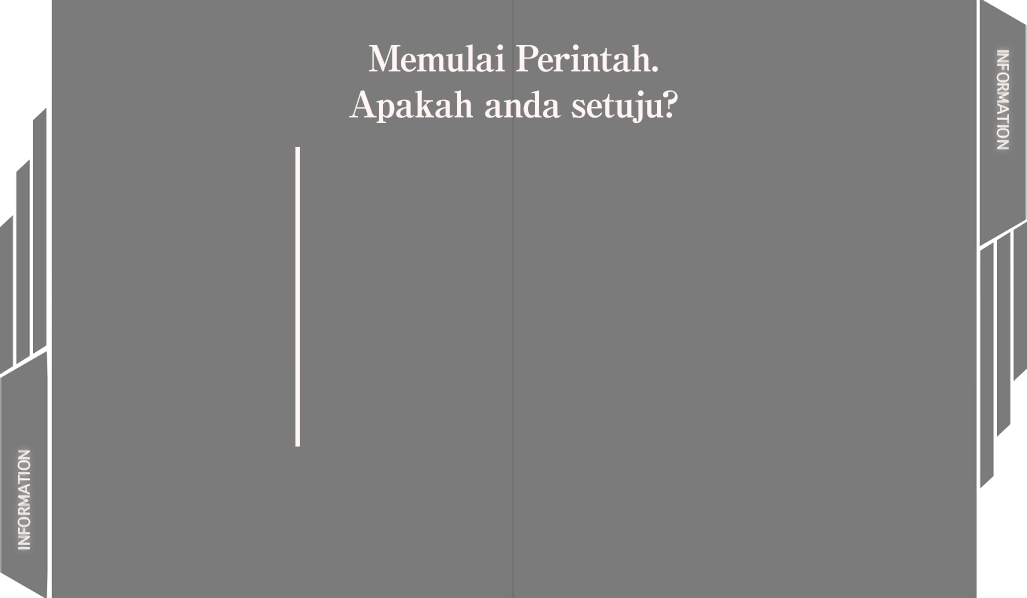
<style>
.page{position:relative;width:1027px;height:598px;background:#7b7b7b}
.page>*{position:absolute;margin:0}
.t1{font:36px/46px "RyuminPro-ExBold";letter-spacing:-0.04em;color:#fff5f3}
</style>
<div class="page">
<p class="t1" style="left:349px;top:44px;width:329px;height:79px;text-align:center">Memulai Perintah.<br>Apakah anda setuju?</p>
</div>
